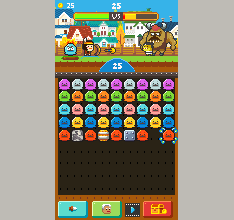
<style>
.page{position:relative;width:234px;height:220px;background:#bebbb5}
.page>*{position:absolute;margin:0}
.t1{font:8.3px "BerlinSansFBDemi-Bold";color:#fff6f6}
.t2{font:10.4px "BerlinSansFBDemi-Bold";color:#fff6f6}
</style>
<div class="page">
<p class="t1" style="left:67px;top:3px;width:7px;height:5px">25</p>
<p class="t2" style="left:112px;top:3px;width:9px;height:6px">25</p>
<p class="t1" style="left:112px;top:14px;width:8px;height:5px">VS</p>
<p class="t2" style="left:113px;top:63px;width:9px;height:6px">25</p>
</div>
